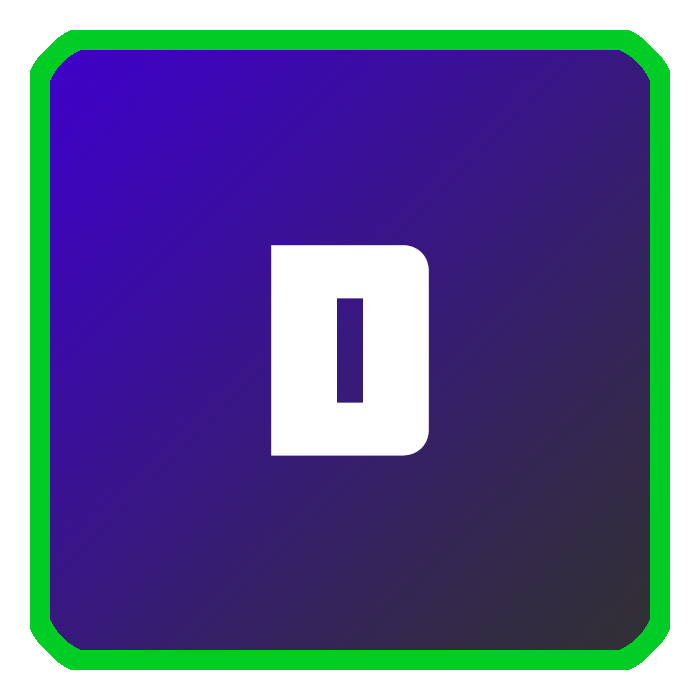
<style>
.page{position:relative;width:700px;height:700px;background:#ffffff}
.page>*{position:absolute;margin:0}
.t1{font:300px "Molot";letter-spacing:0.12em;color:#ffffff}
</style>
<div class="page">
<p class="t1" style="left:271px;top:245px;width:158px;height:211px">D</p>
</div>
